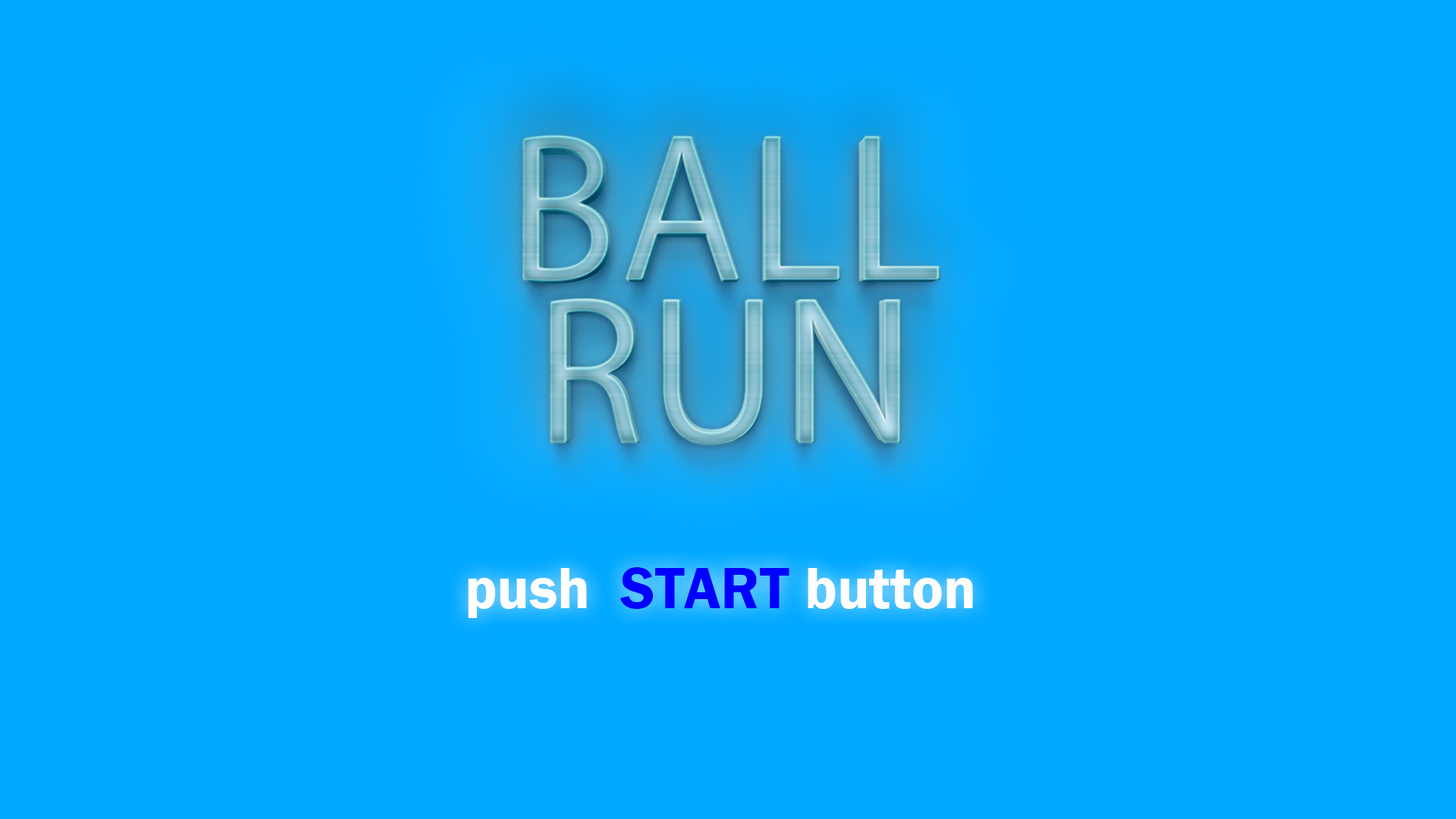
<style>
.page{position:relative;width:1456px;height:819px;background:#00a8ff}
.page>*{position:absolute;margin:0}
.t1{font:59.9px "FranklinGothic-Demi";color:#ffffff}
.t2{font:59.9px "FranklinGothic-Demi";color:#0000ff}
</style>
<div class="page">
<p class="t1" style="left:468px;top:567px;width:505px;height:51px">push  <span class="t2">START</span> button</p>
<p class="t1" style="left:468px;top:567px;width:505px;height:51px">push  <span class="t2">START</span> button</p>
</div>
